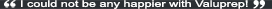
<style>
.page{position:relative;width:272px;height:9px;background:#2b2f33}
.page>*{position:absolute;margin:0}
.t1{font:9px "ArialMT";color:#ffffff;scale:1.41 1}
</style>
<div class="page">
<p class="t1" style="left:21px;top:0px;width:227px;height:9px">I could not be any happier with Valuprep!</p>
</div>
